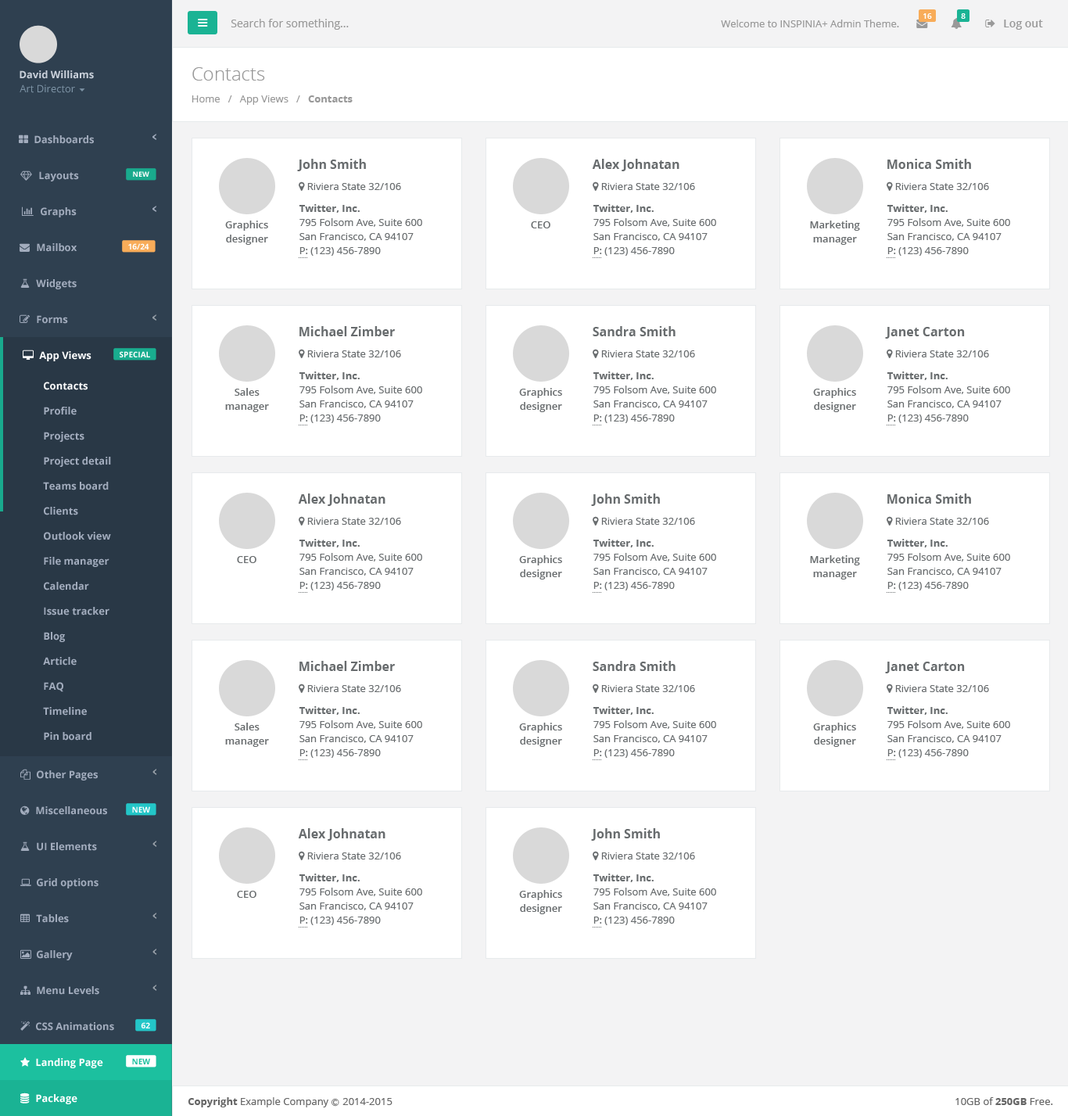
<style>
.page{position:relative;width:1068px;height:1116px;background:#ffffff}
.page>*{position:absolute;margin:0}
.t1{font:7.8px "OpenSans-Semibold";color:#ffffff}
.t2{font:11px "OpenSans";color:#999999}
.t3{font:10.2px "OpenSans";color:#999999}
.t4{font:11px "OpenSans-Semibold";color:#999999}
.t5{font:10.2px "OpenSans-Bold";color:#cad1db}
.t6{font:18.8px "OpenSans-Light";color:#999999}
.t7{font:10.2px "OpenSans";color:#7d93a5}
.t8{font:10.2px "OpenSans-Bold";color:#999999}
.t9{font:10.2px "OpenSans-Bold";color:#a2acbd}
.t10{font:12.5px "OpenSans-Bold";color:#686c6d}
.t11{font:7px "OpenSans-Bold";color:#fefefe}
.t12{font:10.2px "OpenSans";color:#686c6d}
.t13{font:10.2px "OpenSans-Bold";color:#686c6d}
.t14{font:10.2px/14.1px "OpenSans-Semibold";color:#686c6d}
.t15{font:10.2px/14.1px "OpenSans";color:#686c6d}
.t16{font:10.2px "OpenSans-Semibold";color:#686c6d}
.t17{font:7.8px "OpenSans-Bold";color:#fefefe}
.t18{font:6.3px "OpenSans";color:#686c6d}
.t19{font:10.2px "OpenSans-Bold";color:#ffffff}
.t20{font:7.8px "OpenSans-Bold";color:#1cc09f}
.t21{font:10.2px "OpenSans";color:#666666}
.t22{font:10.2px "OpenSans-Bold";color:#666666}
.t23{font:7.8px "Meiryo";color:#666666}
</style>
<div class="page">
<p class="t1" style="left:924px;top:13px;width:8px;height:6px">16</p>
<p class="t1" style="left:961px;top:13px;width:5px;height:6px">8</p>
<p class="t2" style="left:231px;top:19px;width:118px;height:11px">Search for something...</p>
<p class="t3" style="left:721px;top:20px;width:178px;height:7px">Welcome to INSPINIA+ Admin Theme.</p>
<p class="t4" style="left:1004px;top:20px;width:39px;height:10px">Log out</p>
<p class="t5" style="left:20px;top:70px;width:74px;height:9px">David Williams</p>
<p class="t6" style="left:192px;top:67px;width:73px;height:14px">Contacts</p>
<p class="t7" style="left:20px;top:84px;width:55px;height:9px">Art Director</p>
<p class="t3" style="left:192px;top:95px;width:161px;height:10px">Home   /   App Views   /   <span class="t8">Contacts</span></p>
<p class="t9" style="left:34px;top:135px;width:60px;height:9px">Dashboards</p>
<p class="t10" style="left:297px;top:159px;width:69px;height:12px">John Smith</p>
<p class="t10" style="left:592px;top:159px;width:88px;height:12px">Alex Johnatan</p>
<p class="t10" style="left:888px;top:159px;width:83px;height:10px">Monica Smith</p>
<p class="t9" style="left:39px;top:171px;width:40px;height:10px">Layouts</p>
<p class="t11" style="left:133px;top:171px;width:16px;height:6px">NEW</p>
<p class="t12" style="left:307px;top:183px;width:94px;height:7px">Riviera State 32/106</p>
<p class="t12" style="left:601px;top:183px;width:94px;height:7px">Riviera State 32/106</p>
<p class="t12" style="left:896px;top:183px;width:93px;height:7px">Riviera State 32/106</p>
<p class="t9" style="left:41px;top:207px;width:36px;height:10px">Graphs</p>
<p class="t13" style="left:299px;top:204px;width:61px;height:9px">Twitter, Inc.</p>
<p class="t13" style="left:593px;top:204px;width:61px;height:9px">Twitter, Inc.</p>
<p class="t13" style="left:887px;top:204px;width:61px;height:9px">Twitter, Inc.</p>
<p class="t14" style="left:225px;top:221px;width:43px;height:24px;text-align:center">Graphics<br>designer</p>
<p class="t15" style="left:300px;top:218px;width:122px;height:38px">795 Folsom Ave, Suite 600<br>San Francisco, CA 94107<br>P: (123) 456-7890</p>
<p class="t16" style="left:531px;top:221px;width:20px;height:7px">CEO</p>
<p class="t15" style="left:594px;top:218px;width:122px;height:38px">795 Folsom Ave, Suite 600<br>San Francisco, CA 94107<br>P: (123) 456-7890</p>
<p class="t14" style="left:810px;top:221px;width:50px;height:24px;text-align:center">Marketing<br>manager</p>
<p class="t15" style="left:888px;top:218px;width:123px;height:38px">795 Folsom Ave, Suite 600<br>San Francisco, CA 94107<br>P: (123) 456-7890</p>
<p class="t9" style="left:37px;top:243px;width:40px;height:9px">Mailbox</p>
<p class="t17" style="left:128px;top:243px;width:21px;height:6px">16/24</p>
<p class="t18" style="left:299px;top:257px;width:8px;height:1px">......</p>
<p class="t18" style="left:593px;top:257px;width:8px;height:1px">......</p>
<p class="t18" style="left:887px;top:257px;width:9px;height:1px">......</p>
<p class="t9" style="left:36px;top:279px;width:41px;height:10px">Widgets</p>
<p class="t9" style="left:37px;top:315px;width:31px;height:9px">Forms</p>
<p class="t10" style="left:300px;top:326px;width:95px;height:10px">Michael Zimber</p>
<p class="t10" style="left:593px;top:326px;width:83px;height:10px">Sandra Smith</p>
<p class="t10" style="left:885px;top:327px;width:80px;height:12px">Janet Carton</p>
<p class="t19" style="left:39px;top:351px;width:53px;height:10px">App Views</p>
<p class="t17" style="left:120px;top:351px;width:30px;height:6px">SPECIAL</p>
<p class="t12" style="left:307px;top:350px;width:94px;height:7px">Riviera State 32/106</p>
<p class="t12" style="left:601px;top:350px;width:94px;height:7px">Riviera State 32/106</p>
<p class="t12" style="left:896px;top:350px;width:93px;height:7px">Riviera State 32/106</p>
<p class="t13" style="left:299px;top:372px;width:61px;height:8px">Twitter, Inc.</p>
<p class="t13" style="left:593px;top:372px;width:61px;height:8px">Twitter, Inc.</p>
<p class="t13" style="left:887px;top:372px;width:61px;height:8px">Twitter, Inc.</p>
<p class="t19" style="left:44px;top:382px;width:44px;height:8px">Contacts</p>
<p class="t14" style="left:225px;top:388px;width:44px;height:24px;text-align:center">Sales<br>manager</p>
<p class="t15" style="left:300px;top:386px;width:122px;height:37px">795 Folsom Ave, Suite 600<br>San Francisco, CA 94107<br>P: (123) 456-7890</p>
<p class="t14" style="left:519px;top:388px;width:43px;height:24px;text-align:center">Graphics<br>designer</p>
<p class="t15" style="left:594px;top:386px;width:122px;height:37px">795 Folsom Ave, Suite 600<br>San Francisco, CA 94107<br>P: (123) 456-7890</p>
<p class="t14" style="left:813px;top:388px;width:43px;height:24px;text-align:center">Graphics<br>designer</p>
<p class="t15" style="left:888px;top:386px;width:123px;height:37px">795 Folsom Ave, Suite 600<br>San Francisco, CA 94107<br>P: (123) 456-7890</p>
<p class="t9" style="left:44px;top:407px;width:33px;height:8px">Profile</p>
<p class="t18" style="left:299px;top:425px;width:8px;height:0px">......</p>
<p class="t18" style="left:593px;top:425px;width:8px;height:0px">......</p>
<p class="t18" style="left:887px;top:425px;width:9px;height:0px">......</p>
<p class="t9" style="left:44px;top:432px;width:40px;height:10px">Projects</p>
<p class="t9" style="left:44px;top:457px;width:67px;height:10px">Project detail</p>
<p class="t9" style="left:43px;top:482px;width:66px;height:8px">Teams board</p>
<p class="t10" style="left:298px;top:494px;width:88px;height:12px">Alex Johnatan</p>
<p class="t10" style="left:591px;top:494px;width:69px;height:12px">John Smith</p>
<p class="t10" style="left:888px;top:494px;width:83px;height:10px">Monica Smith</p>
<p class="t9" style="left:44px;top:507px;width:34px;height:8px">Clients</p>
<p class="t12" style="left:307px;top:518px;width:94px;height:7px">Riviera State 32/106</p>
<p class="t12" style="left:601px;top:518px;width:94px;height:7px">Riviera State 32/106</p>
<p class="t12" style="left:896px;top:518px;width:93px;height:7px">Riviera State 32/106</p>
<p class="t9" style="left:44px;top:532px;width:67px;height:8px">Outlook view</p>
<p class="t13" style="left:299px;top:539px;width:61px;height:8px">Twitter, Inc.</p>
<p class="t13" style="left:593px;top:539px;width:61px;height:8px">Twitter, Inc.</p>
<p class="t13" style="left:887px;top:539px;width:61px;height:8px">Twitter, Inc.</p>
<p class="t9" style="left:44px;top:557px;width:65px;height:10px">File manager</p>
<p class="t16" style="left:237px;top:556px;width:20px;height:7px">CEO</p>
<p class="t15" style="left:300px;top:553px;width:122px;height:38px">795 Folsom Ave, Suite 600<br>San Francisco, CA 94107<br>P: (123) 456-7890</p>
<p class="t14" style="left:519px;top:555px;width:43px;height:25px;text-align:center">Graphics<br>designer</p>
<p class="t15" style="left:594px;top:553px;width:122px;height:38px">795 Folsom Ave, Suite 600<br>San Francisco, CA 94107<br>P: (123) 456-7890</p>
<p class="t14" style="left:810px;top:555px;width:50px;height:25px;text-align:center">Marketing<br>manager</p>
<p class="t15" style="left:888px;top:553px;width:123px;height:38px">795 Folsom Ave, Suite 600<br>San Francisco, CA 94107<br>P: (123) 456-7890</p>
<p class="t9" style="left:44px;top:582px;width:45px;height:9px">Calendar</p>
<p class="t18" style="left:299px;top:592px;width:8px;height:1px">......</p>
<p class="t18" style="left:593px;top:592px;width:8px;height:1px">......</p>
<p class="t18" style="left:887px;top:592px;width:9px;height:1px">......</p>
<p class="t9" style="left:44px;top:607px;width:65px;height:9px">Issue tracker</p>
<p class="t9" style="left:44px;top:632px;width:21px;height:10px">Blog</p>
<p class="t9" style="left:43px;top:657px;width:34px;height:9px">Article</p>
<p class="t10" style="left:300px;top:661px;width:95px;height:10px">Michael Zimber</p>
<p class="t10" style="left:593px;top:661px;width:83px;height:10px">Sandra Smith</p>
<p class="t10" style="left:885px;top:662px;width:80px;height:11px">Janet Carton</p>
<p class="t9" style="left:44px;top:682px;width:19px;height:10px">FAQ</p>
<p class="t12" style="left:307px;top:685px;width:94px;height:7px">Riviera State 32/106</p>
<p class="t12" style="left:601px;top:685px;width:94px;height:7px">Riviera State 32/106</p>
<p class="t12" style="left:896px;top:685px;width:93px;height:7px">Riviera State 32/106</p>
<p class="t9" style="left:43px;top:707px;width:44px;height:9px">Timeline</p>
<p class="t13" style="left:299px;top:706px;width:61px;height:9px">Twitter, Inc.</p>
<p class="t13" style="left:593px;top:706px;width:61px;height:9px">Twitter, Inc.</p>
<p class="t13" style="left:887px;top:706px;width:61px;height:9px">Twitter, Inc.</p>
<p class="t14" style="left:225px;top:723px;width:44px;height:24px;text-align:center">Sales<br>manager</p>
<p class="t15" style="left:300px;top:720px;width:122px;height:38px">795 Folsom Ave, Suite 600<br>San Francisco, CA 94107<br>P: (123) 456-7890</p>
<p class="t14" style="left:519px;top:723px;width:43px;height:24px;text-align:center">Graphics<br>designer</p>
<p class="t15" style="left:594px;top:720px;width:122px;height:38px">795 Folsom Ave, Suite 600<br>San Francisco, CA 94107<br>P: (123) 456-7890</p>
<p class="t14" style="left:813px;top:723px;width:43px;height:24px;text-align:center">Graphics<br>designer</p>
<p class="t15" style="left:888px;top:720px;width:123px;height:38px">795 Folsom Ave, Suite 600<br>San Francisco, CA 94107<br>P: (123) 456-7890</p>
<p class="t9" style="left:44px;top:732px;width:48px;height:9px">Pin board</p>
<p class="t18" style="left:299px;top:759px;width:8px;height:1px">......</p>
<p class="t18" style="left:593px;top:759px;width:8px;height:1px">......</p>
<p class="t18" style="left:887px;top:759px;width:9px;height:1px">......</p>
<p class="t9" style="left:37px;top:770px;width:61px;height:11px">Other Pages</p>
<p class="t9" style="left:36px;top:806px;width:71px;height:9px">Miscellaneous</p>
<p class="t17" style="left:132px;top:806px;width:18px;height:7px">NEW</p>
<p class="t10" style="left:298px;top:828px;width:88px;height:13px">Alex Johnatan</p>
<p class="t10" style="left:591px;top:828px;width:69px;height:13px">John Smith</p>
<p class="t9" style="left:37px;top:842px;width:60px;height:9px">UI Elements</p>
<p class="t12" style="left:307px;top:853px;width:94px;height:7px">Riviera State 32/106</p>
<p class="t12" style="left:601px;top:853px;width:94px;height:7px">Riviera State 32/106</p>
<p class="t9" style="left:37px;top:878px;width:62px;height:11px">Grid options</p>
<p class="t13" style="left:299px;top:874px;width:61px;height:8px">Twitter, Inc.</p>
<p class="t13" style="left:593px;top:874px;width:61px;height:8px">Twitter, Inc.</p>
<p class="t16" style="left:237px;top:891px;width:20px;height:7px">CEO</p>
<p class="t15" style="left:300px;top:888px;width:122px;height:37px">795 Folsom Ave, Suite 600<br>San Francisco, CA 94107<br>P: (123) 456-7890</p>
<p class="t14" style="left:519px;top:890px;width:43px;height:24px;text-align:center">Graphics<br>designer</p>
<p class="t15" style="left:594px;top:888px;width:122px;height:37px">795 Folsom Ave, Suite 600<br>San Francisco, CA 94107<br>P: (123) 456-7890</p>
<p class="t9" style="left:36px;top:914px;width:33px;height:9px">Tables</p>
<p class="t18" style="left:299px;top:927px;width:8px;height:1px">......</p>
<p class="t18" style="left:593px;top:927px;width:8px;height:1px">......</p>
<p class="t9" style="left:37px;top:950px;width:36px;height:10px">Gallery</p>
<p class="t9" style="left:37px;top:986px;width:62px;height:9px">Menu Levels</p>
<p class="t9" style="left:36px;top:1022px;width:78px;height:9px">CSS Animations</p>
<p class="t17" style="left:141px;top:1022px;width:9px;height:7px">62</p>
<p class="t19" style="left:36px;top:1058px;width:67px;height:10px">Landing Page</p>
<p class="t20" style="left:132px;top:1058px;width:18px;height:6px">NEW</p>
<p class="t19" style="left:36px;top:1094px;width:41px;height:10px">Package</p>
<p class="t21" style="left:188px;top:1097px;width:205px;height:10px"><span class="t22">Copyright</span> Example Company <span class="t23">Ⓒ </span>2014-2015</p>
<p class="t21" style="left:956px;top:1097px;width:98px;height:8px">10GB of <span class="t22">250GB</span> Free.</p>
</div>
